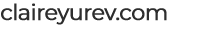
<style>
.page{position:relative;width:222px;height:29px;background:#ffffff}
.page>*{position:absolute;margin:0}
.t1{font:22px "Montserrat-Regular";letter-spacing:-0.04em;color:#2d2d2d;font-weight:bold}
</style>
<div class="page">
<p class="t1" style="left:1px;top:3px;width:166px;height:22px">claireyurev.com</p>
</div>
